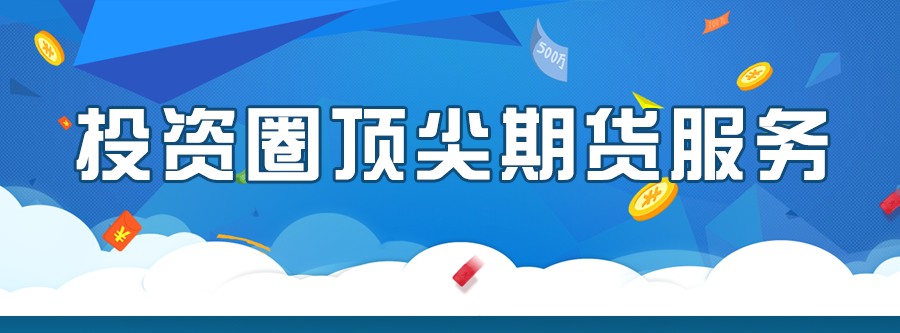
<style>
.page{position:relative;width:900px;height:333px;background:#ffffff}
.page>*{position:absolute;margin:0}
.t1{font:80px "DFZongYi-Bd-80-Win-GB";letter-spacing:0.06em;color:#ffffff}
</style>
<div class="page">
<p class="t1" style="left:76px;top:107px;width:752px;height:74px">投资圈顶尖期货服务</p>
</div>
